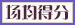
<style>
.page{position:relative;width:75px;height:25px;background:#f9faf3}
.page>*{position:absolute;margin:0}
.t1{font:16px "DFYaSongW9";color:#4d2241}
</style>
<div class="page">
<p class="t1" style="left:5px;top:4px;width:64px;height:16px">场均得分</p>
</div>
